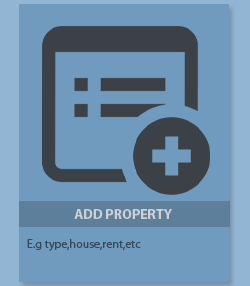
<style>
.page{position:relative;width:250px;height:286px;background:#719bbe}
.page>*{position:absolute;margin:0}
.t1{font:14px "MyriadPro-Bold";color:#e0dddd}
.t2{font:12px "MyriadPro-Regular";color:#364a5b}
</style>
<div class="page">
<p class="t1" style="left:74px;top:209px;width:98px;height:10px;opacity:0.86">ADD PROPERTY</p>
<p class="t2" style="left:27px;top:239px;width:114px;height:12px">E.g type,house,rent,etc</p>
</div>
